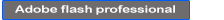
<style>
.page{position:relative;width:224px;height:20px;background:#6e6c6c}
.page>*{position:absolute;margin:0}
.t1{font:10.2px "ArialRoundedMTBold";color:#fcfcfc;scale:1.31 1}
</style>
<div class="page">
<p class="t1" style="left:15px;top:5px;width:160px;height:10px">Adobe flash professional</p>
</div>
